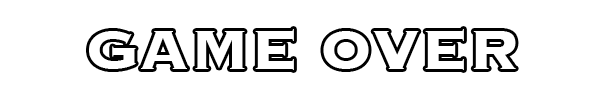
<style>
.page{position:relative;width:598px;height:100px;background:#ffffff}
.page>*{position:absolute;margin:0}
.t1{font:72px "Copperplate-Bold";color:#ffffff}
</style>
<div class="page">
<p class="t1" style="left:89px;top:29px;width:427px;height:41px">GAME OVER</p>
</div>
